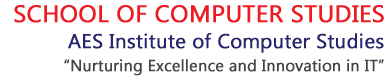
<style>
.page{position:relative;width:390px;height:80px;background:#ffffff}
.page>*{position:absolute;margin:0}
.t1{font:24px "SegoeUI";color:#ed1c23;font-weight:bold}
.t2{font:20px "SegoeUI";color:#29256b;font-weight:bold}
.t3{font:16px "SegoeUI";color:#454343;font-weight:bold}
</style>
<div class="page">
<p class="t1" style="left:14px;top:5px;width:370px;height:18px">SCHOOL OF COMPUTER STUDIES</p>
<p class="t2" style="left:68px;top:33px;width:316px;height:20px">AES Institute of Computer Studies</p>
<p class="t3" style="left:64px;top:59px;width:320px;height:17px">“Nurturing Excellence and Innovation in IT”</p>
</div>
